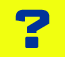
<style>
.page{position:relative;width:65px;height:57px;background:#f1ff10}
.page>*{position:absolute;margin:0}
.t1{font:72px "BankGothicBT-Medium";color:#003399;text-transform:uppercase;font-weight:bold}
</style>
<div class="page">
<p class="t1" style="left:15px;top:9px;width:35px;height:39px">?</p>
</div>
